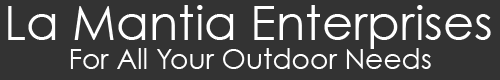
<style>
.page{position:relative;width:500px;height:80px;background:#333333}
.page>*{position:absolute;margin:0}
.t1{font:48px "CenturyGothic";color:#ffffff}
.t2{font:28px "CenturyGothic";color:#ffffff}
</style>
<div class="page">
<p class="t1" style="left:8px;top:5px;width:483px;height:44px">La Mantia Enterprises</p>
<p class="t2" style="left:70px;top:48px;width:361px;height:21px">For All Your Outdoor Needs</p>
</div>
